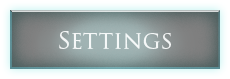
<style>
.page{position:relative;width:230px;height:79px}
.page>*{position:absolute;margin:0}
.t1{font:24px "TrajanPro3-Regular";color:#f1f1f1}
</style>
<div class="page">
<p class="t1" style="left:59px;top:31px;width:112px;height:18px">Settings</p>
</div>
